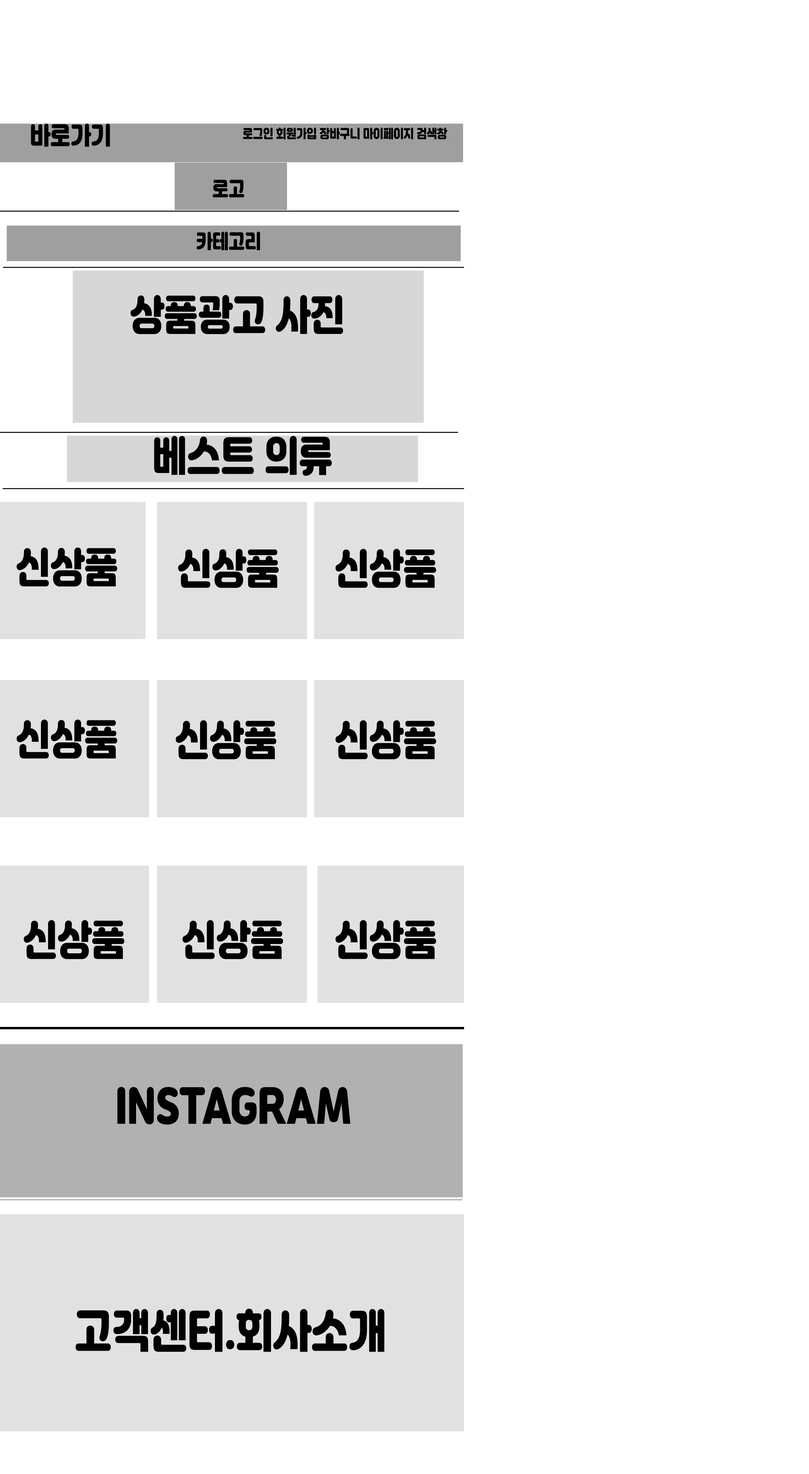
<style>
.page{position:relative;width:809px;height:1474px;background:#ffffff}
.page>*{position:absolute;margin:0}
.t1{font:24.6px "ygotjalnanfontOTF";color:#000000;scale:0.83 1}
.t2{font:12.3px "ygotjalnanfontOTF";color:#000000;scale:0.83 1}
.t3{font:19.7px "ygotjalnanfontOTF";color:#000000;scale:0.83 1}
.t4{font:41.4px "ygotjalnanfontOTF";color:#000000;scale:0.83 1}
.t5{font:45.5px "ygotjalnanfontOTF";color:#000000;scale:0.83 1}
</style>
<div class="page">
<p class="t1" style="left:31px;top:123px;width:79px;height:24px">바로가기</p>
<p class="t2" style="left:243px;top:127px;width:205px;height:12px">로그인 회원가입 장바구니 마이페이지 검색창</p>
<p class="t3" style="left:213px;top:179px;width:31px;height:18px">로고</p>
<p class="t3" style="left:197px;top:232px;width:63px;height:18px">카테고리</p>
<p class="t4" style="left:130px;top:295px;width:213px;height:39px">상품광고 사진</p>
<p class="t4" style="left:154px;top:436px;width:178px;height:40px">베스트 의류</p>
<p class="t4" style="left:17px;top:547px;width:100px;height:39px">신상품</p>
<p class="t4" style="left:178px;top:549px;width:101px;height:39px">신상품</p>
<p class="t4" style="left:336px;top:549px;width:100px;height:39px">신상품</p>
<p class="t4" style="left:17px;top:719px;width:100px;height:39px">신상품</p>
<p class="t4" style="left:176px;top:720px;width:101px;height:39px">신상품</p>
<p class="t4" style="left:336px;top:720px;width:100px;height:39px">신상품</p>
<p class="t4" style="left:24px;top:920px;width:101px;height:39px">신상품</p>
<p class="t4" style="left:182px;top:920px;width:101px;height:39px">신상품</p>
<p class="t4" style="left:336px;top:920px;width:100px;height:39px">신상품</p>
<p class="t5" style="left:117px;top:1087px;width:233px;height:37px">INSTAGRAM</p>
<p class="t5" style="left:76px;top:1308px;width:309px;height:44px">고객센터.회사소개</p>
</div>
